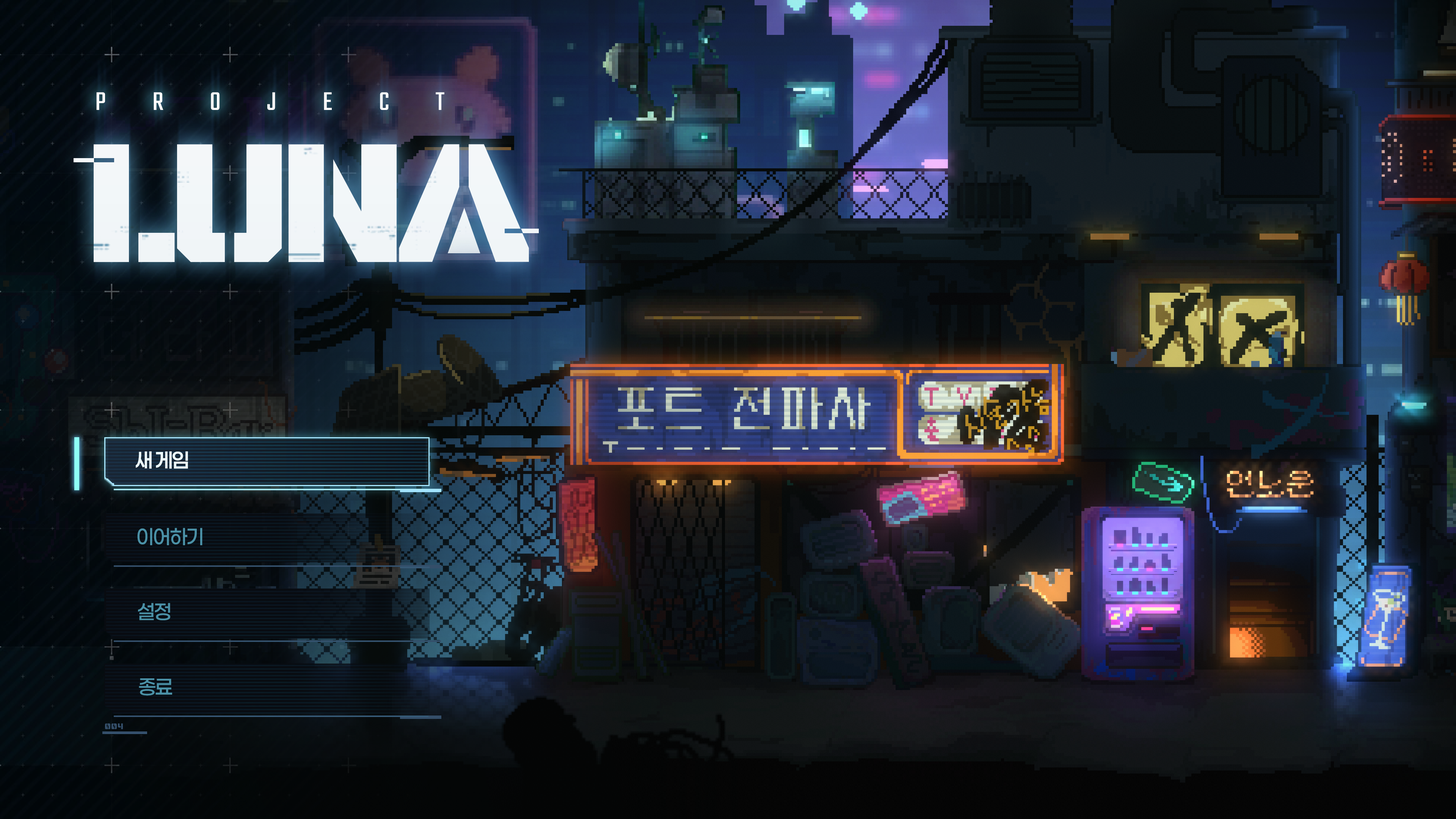
<style>
.page{position:relative;width:1456px;height:819px}
.page>*{position:absolute;margin:0}
.t1{font:28.2px "Teko-Regular";letter-spacing:1.64em;color:#ffffff}
.t2{font:20.2px "Paperlogy-6SemiBold";letter-spacing:-0.05em;color:#edfcff}
.t3{font:20.2px "Paperlogy-5Medium";letter-spacing:-0.05em;color:#4b91a7}
.t4{font:20.2px "Paperlogy-5Medium";letter-spacing:-0.05em;color:#4b91a6}
.t5{font:11.3px "ThedusStencilCondensed-Regular";letter-spacing:0.025em;color:#344e69}
</style>
<div class="page">
<p class="t1" style="left:96px;top:92px;width:348px;height:18px">PROJECT</p>
<p class="t2" style="left:136px;top:451px;width:52px;height:18px">새 게임</p>
<p class="t3" style="left:137px;top:528px;width:65px;height:17px">이어하기</p>
<p class="t3" style="left:138px;top:603px;width:32px;height:17px">설정</p>
<p class="t4" style="left:139px;top:678px;width:33px;height:18px">종료</p>
<p class="t5" style="left:105px;top:723px;width:18px;height:6px">004</p>
</div>
